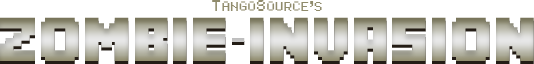
<style>
.page{position:relative;width:534px;height:64px;background:#ffffff}
.page>*{position:absolute;margin:0}
.t1{font:12px "VolterGoldfish";letter-spacing:0.05em;color:#908b6c}
.t2{font:14.4px "VolterGoldfish";letter-spacing:0.05em;color:#908b6c}
.t3{font:43.2px "MineCrafter-3";letter-spacing:0.05em}
</style>
<div class="page">
<p class="t1" style="left:212px;top:0px;width:110px;height:11px"><span class="t2">T</span>ANGO<span class="t2">S</span>OURCE’S</p>
<p class="t3" style="left:0px;top:17px;width:534px;height:44px">Zombie-Invasion</p>
<p class="t3" style="left:0px;top:20px;width:534px;height:44px">Zombie-Invasion</p>
</div>
